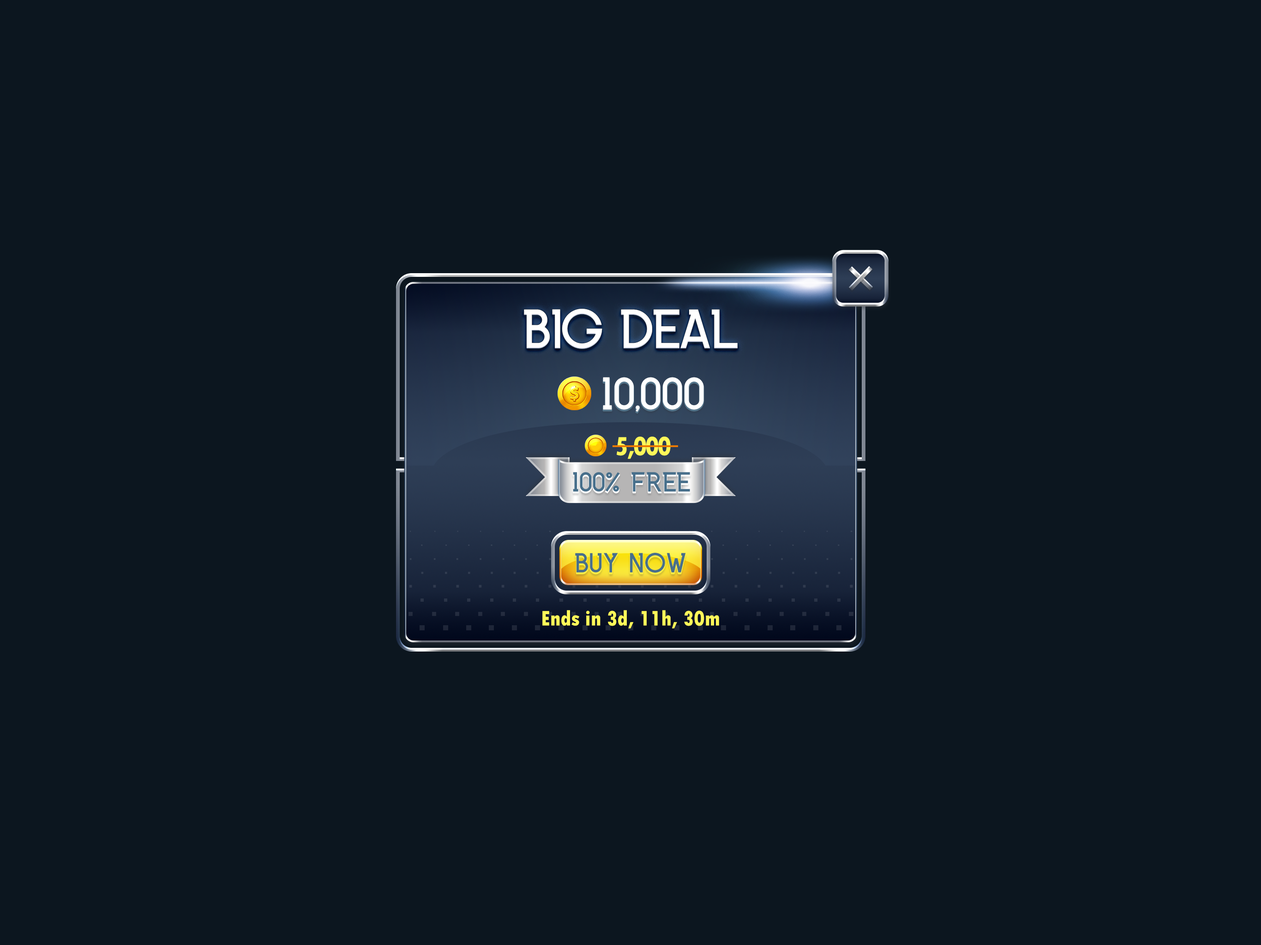
<style>
.page{position:relative;width:1261px;height:945px;background:#0c161f}
.page>*{position:absolute;margin:0}
.t1{font:55.4px "INKFERNO";letter-spacing:-0.025em;color:#ffffff;text-transform:uppercase}
.t2{font:46.2px "INKFERNO";color:#ffffff;text-transform:uppercase}
.t3{font:27.7px "TwCenMT-CondensedExtraBold";letter-spacing:-0.05em;color:#fef859;text-transform:uppercase}
.t4{font:27.7px "INKFERNO";color:#476f8b;text-transform:uppercase}
.t5{font:22.2px "TwCenMT-CondensedExtraBold";color:#fef859}
</style>
<div class="page">
<p class="t1" style="left:524px;top:309px;width:214px;height:40px">big deal</p>
<p class="t2" style="left:603px;top:377px;width:101px;height:35px">10,000</p>
<p class="t3" style="left:617px;top:437px;width:54px;height:22px">5,000</p>
<p class="t4" style="left:573px;top:472px;width:117px;height:20px">100% free</p>
<p class="t4" style="left:575px;top:553px;width:111px;height:20px">buy now</p>
<p class="t5" style="left:542px;top:610px;width:177px;height:19px">Ends in 3d, 11h, 30m</p>
</div>
